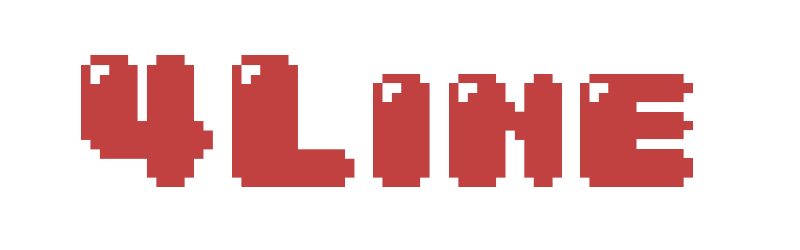
<style>
.page{position:relative;width:800px;height:250px;background:#ffffff}
.page>*{position:absolute;margin:0}
.t1{font:160px "04b30";color:#c14040}
</style>
<div class="page">
<p class="t1" style="left:81px;top:55px;width:612px;height:132px">4Line</p>
</div>
